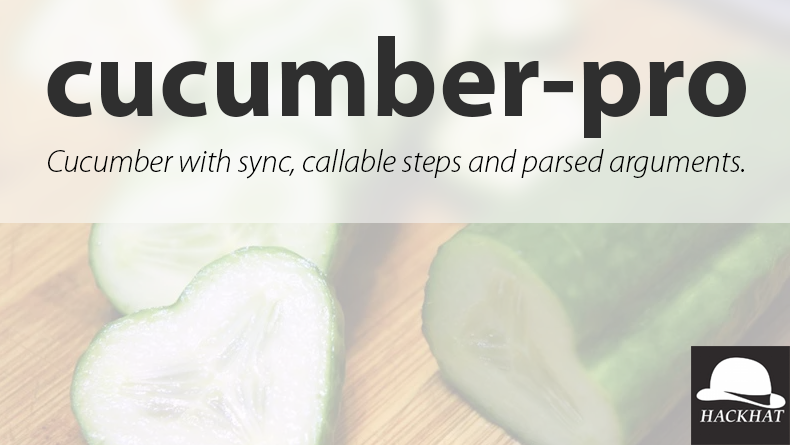
<style>
.page{position:relative;width:790px;height:445px}
.page>*{position:absolute;margin:0}
.t1{font:112px "MyriadPro-Bold";color:#2f2f2f}
.t2{font:31.7px "MyriadPro-LightIt";color:#010101}
</style>
<div class="page">
<p class="t1" style="left:47px;top:36px;width:699px;height:102px">cucumber-pro</p>
<p class="t2" style="left:48px;top:149px;width:696px;height:30px">Cucumber with sync, callable steps and parsed arguments.</p>
</div>
